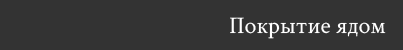
<style>
.page{position:relative;width:403px;height:50px;background:#333333}
.page>*{position:absolute;margin:0}
.t1{font:24px "CrimsonText-Regular";color:#ffffff}
</style>
<div class="page">
<p class="t1" style="left:230px;top:17px;width:156px;height:22px">Покрытие ядом</p>
</div>
